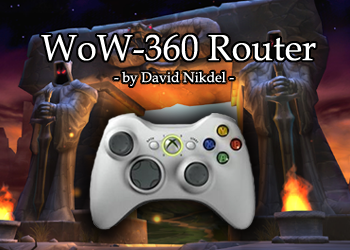
<style>
.page{position:relative;width:350px;height:250px}
.page>*{position:absolute;margin:0}
.t1{font:36px "BookAntiqua";color:#ffffff}
.t2{font:14px "BookAntiqua";color:#ffffff}
</style>
<div class="page">
<p class="t1" style="left:41px;top:34px;width:275px;height:27px">WoW-360 Router</p>
<p class="t2" style="left:114px;top:71px;width:120px;height:15px">- by David Nikdel -</p>
</div>
